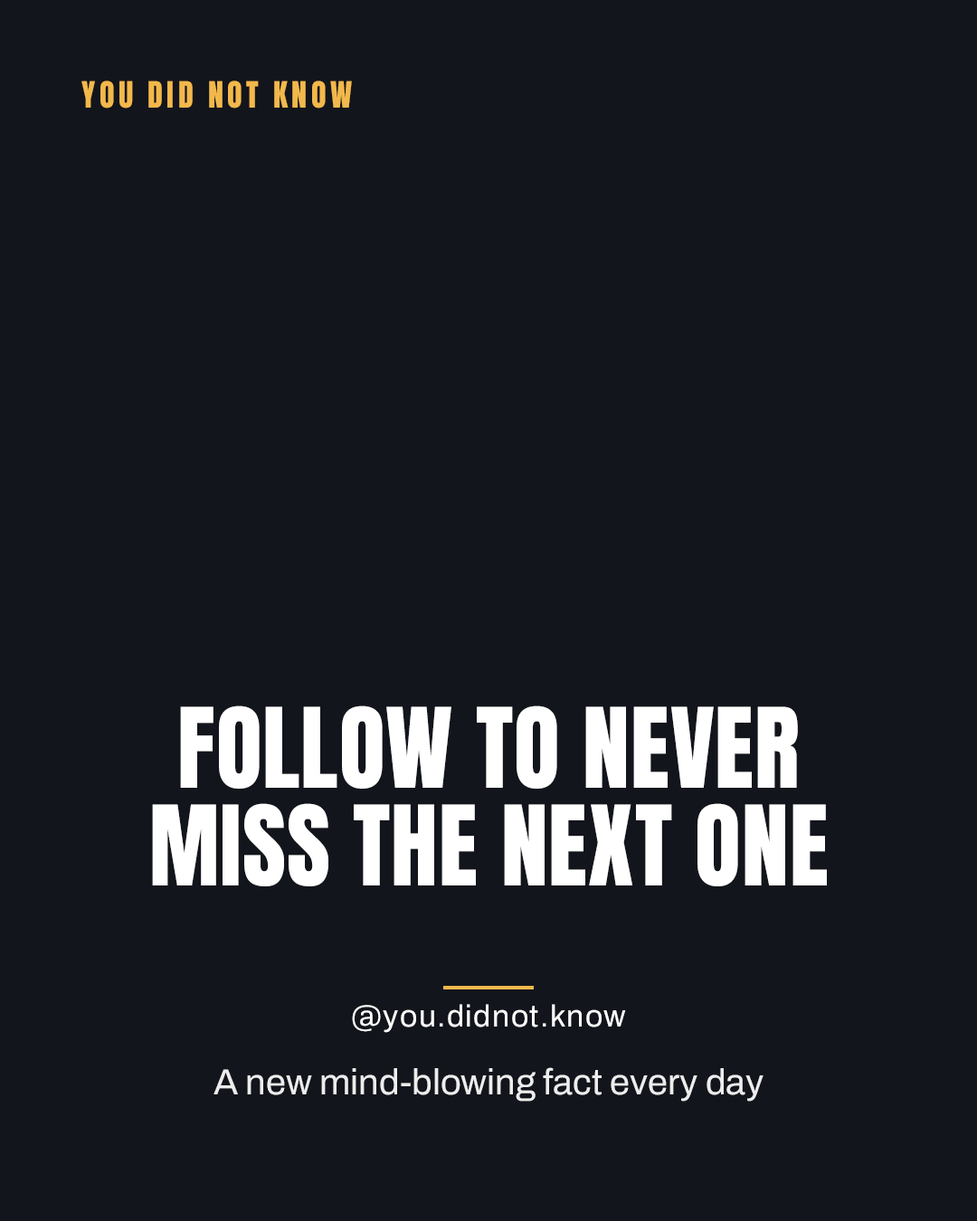
<style>
.page{position:relative;width:977px;height:1221px;background:#13151c}
.page>*{position:absolute;margin:0}
.t1{font:30.7px "Anton-Regular";letter-spacing:0.12em;color:#f2b84b;text-transform:uppercase}
.t2{font:94.1px/97.7px "Anton-Regular";color:#ffffff;text-transform:uppercase}
.t3{font:30.7px "Archivo-Regular";letter-spacing:0.04em;color:#ffffff}
.t4{font:36.2px "Archivo-Regular";color:#ededed}
</style>
<div class="page">
<p class="t1" style="left:81px;top:80px;width:271px;height:29px">YOU DID NOT KNOW</p>
<p class="t2" style="left:152px;top:705px;width:675px;height:181px;text-align:center">FOLLOW TO NEVER MISS THE NEXT ONE</p>
<p class="t3" style="left:352px;top:1004px;width:274px;height:29px">@you.didnot.know</p>
<p class="t4" style="left:213px;top:1067px;width:550px;height:35px">A new mind-blowing fact every day</p>
</div>
